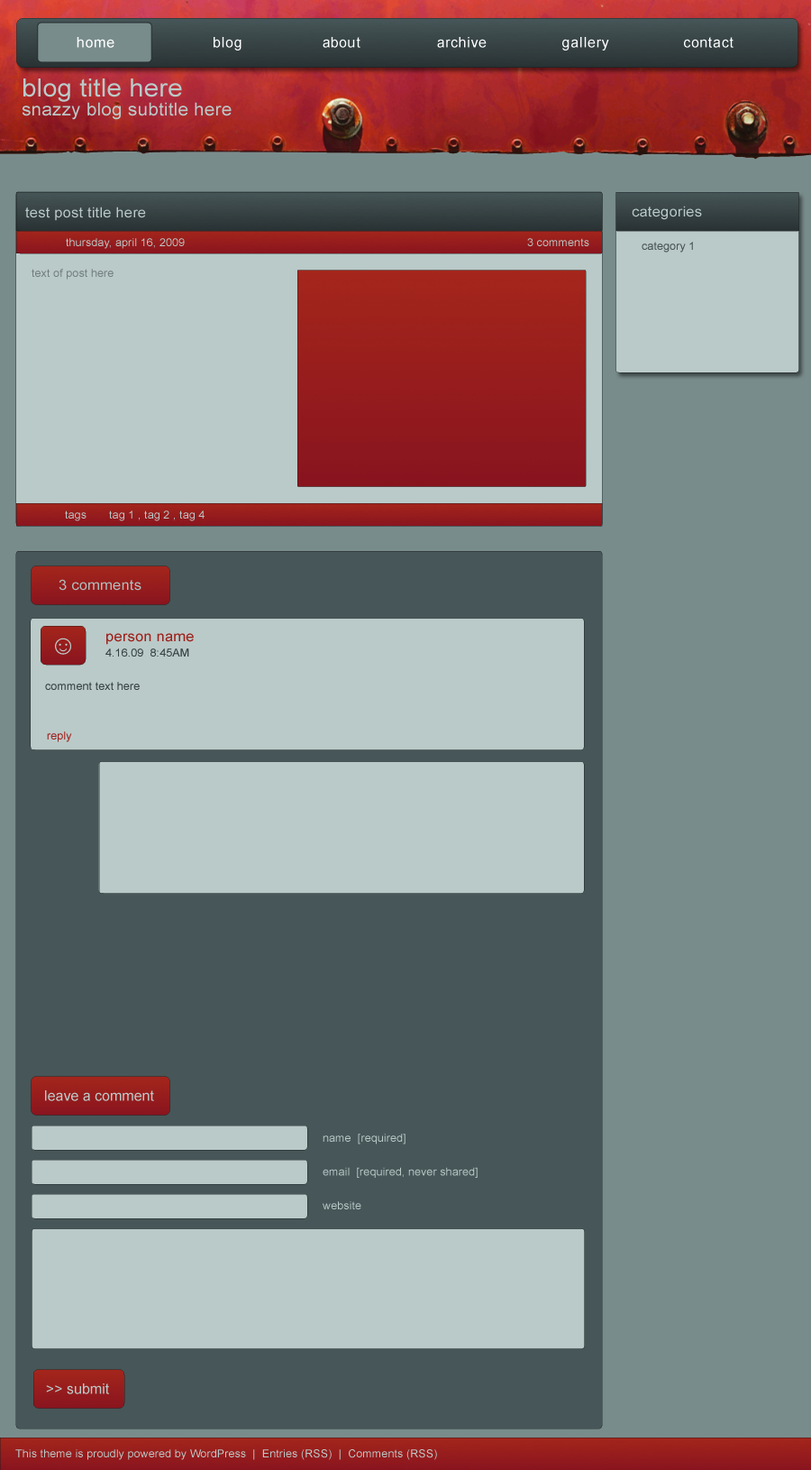
<style>
.page{position:relative;width:811px;height:1470px;background:#bacac8}
.page>*{position:absolute;margin:0}
.t1{font:25px "ArialMT";letter-spacing:0.008em;color:#bacac8;scale:1.05 1}
.t2{font:17.8px "ArialMT";letter-spacing:0.008em;color:#bacac8;scale:1.05 1}
.t3{font:14.3px "ArialMT";letter-spacing:0.008em;color:#bacac8;scale:1.05 1}
.t4{font:10.7px "ArialMT";letter-spacing:0.008em;color:#bacac8;scale:1.05 1}
.t5{font:10.7px "ArialMT";letter-spacing:0.008em;color:#485354;scale:1.05 1}
.t6{font:10.7px "ArialMT";letter-spacing:0.008em;color:#727f7f;scale:1.05 1}
.t7{font:14.3px "ArialMT";letter-spacing:0.008em;color:#aebebd;scale:1.05 1}
.t8{font:14.3px "ArialMT";letter-spacing:0.008em;color:#9d211c;scale:1.05 1}
.t9{font:10.7px "ArialMT";letter-spacing:0.008em;color:#364143;scale:1.05 1}
.t10{font:10.7px "ArialMT";letter-spacing:0.008em;color:#374244;scale:1.05 1}
.t11{font:10.7px "ArialMT";letter-spacing:0.008em;color:#9d211c;scale:1.05 1}
.t12{font:10.7px/33.8px "ArialMT";letter-spacing:0.008em;color:#bacac8;scale:1.05 1}
</style>
<div class="page">
<p class="t1" style="left:23px;top:78px;width:159px;height:24px">blog title here</p>
<p class="t2" style="left:22px;top:102px;width:210px;height:18px">snazzy blog subtitle here</p>
<p class="t3" style="left:25px;top:206px;width:121px;height:15px">test post title here</p>
<p class="t3" style="left:632px;top:206px;width:70px;height:14px">categories</p>
<p class="t4" style="left:66px;top:238px;width:119px;height:11px">thursday, april 16, 2009</p>
<p class="t4" style="left:527px;top:238px;width:63px;height:8px">3 comments</p>
<p class="t5" style="left:642px;top:242px;width:51px;height:10px">category 1</p>
<p class="t6" style="left:32px;top:269px;width:82px;height:10px">text of post here</p>
<p class="t4" style="left:65px;top:510px;width:140px;height:11px">tags       tag 1 , tag 2 , tag 4</p>
<p class="t7" style="left:59px;top:579px;width:83px;height:12px">3 comments</p>
<p class="t8" style="left:106px;top:633px;width:88px;height:12px">person name</p>
<p class="t9" style="left:105px;top:648px;width:84px;height:8px">4.16.09  8:45AM</p>
<p class="t10" style="left:45px;top:682px;width:95px;height:8px">comment text here</p>
<p class="t11" style="left:47px;top:731px;width:25px;height:11px">reply</p>
<p class="t12" style="left:323px;top:1133px;width:155px;height:76px">name  [required]<br>email  [required, never shared]<br>website</p>
<p class="t4" style="left:15px;top:1449px;width:422px;height:11px">This theme is proudly powered by WordPress  |  Entries (RSS)  |  Comments (RSS)</p>
</div>
